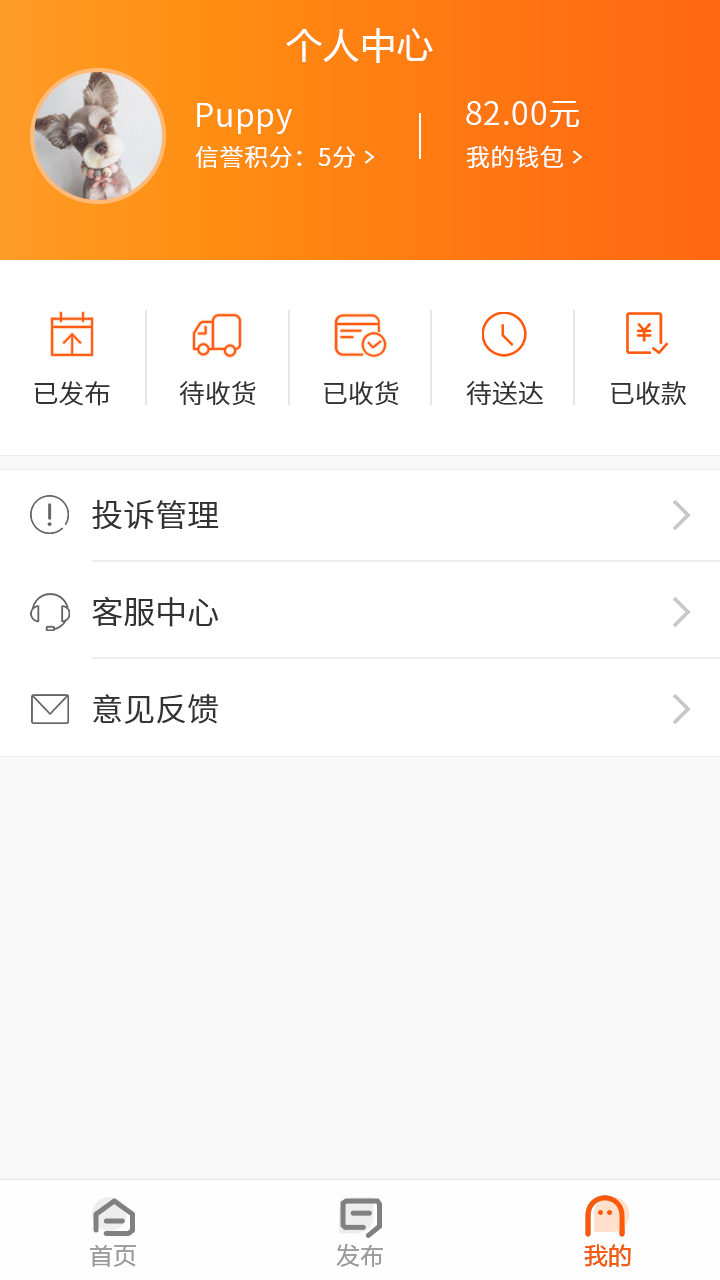
<style>
.page{position:relative;width:720px;height:1280px;background:#ffffff}
.page>*{position:absolute;margin:0}
.t1{font:36px "MicrosoftYaHei";letter-spacing:0.03em;color:#ffffff}
.t2{font:32px "NotoSansCJKsc-DemiLight";letter-spacing:0.03em;color:#ffffff}
.t3{font:24px "NotoSansCJKsc-DemiLight";letter-spacing:0.03em;color:#ffffff}
.t4{font:25.9px "NotoSansCJKsc-DemiLight";color:#333333;font-variant:small-caps}
.t5{font:26px "NotoSansCJKsc-DemiLight";color:#333333;font-variant:small-caps}
.t6{font:32px "NotoSansCJKsc-DemiLight";color:#333333;font-variant:small-caps}
.t7{font:24px "FZLTHJW--GB1-0";color:#999999}
.t8{font:24px "FZLTHJW--GB1-0";color:#ff580a}
</style>
<div class="page">
<p class="t1" style="left:286px;top:28px;width:147px;height:35px">个人中心</p>
<p class="t2" style="left:466px;top:101px;width:113px;height:27px">82.00元</p>
<p class="t2" style="left:197px;top:103px;width:95px;height:31px">Puppy</p>
<p class="t3" style="left:195px;top:146px;width:160px;height:22px">信誉积分：5分</p>
<p class="t3" style="left:466px;top:145px;width:97px;height:23px">我的钱包</p>
<p class="t4" style="left:34px;top:381px;width:76px;height:25px">已发布</p>
<p class="t5" style="left:179px;top:381px;width:77px;height:25px">待收货</p>
<p class="t5" style="left:324px;top:381px;width:75px;height:25px">已收货</p>
<p class="t5" style="left:466px;top:381px;width:77px;height:24px">待送达</p>
<p class="t5" style="left:611px;top:381px;width:76px;height:24px">已收款</p>
<p class="t6" style="left:92px;top:499px;width:127px;height:31px">投诉管理</p>
<p class="t6" style="left:92px;top:596px;width:126px;height:31px">客服中心</p>
<p class="t6" style="left:93px;top:694px;width:125px;height:30px">意见反馈</p>
<p class="t7" style="left:90px;top:1244px;width:46px;height:23px">首页</p>
<p class="t7" style="left:336px;top:1244px;width:47px;height:23px">发布</p>
<p class="t8" style="left:584px;top:1244px;width:47px;height:23px">我的</p>
<p class="t8" style="left:584px;top:1244px;width:47px;height:23px">我的</p>
</div>
